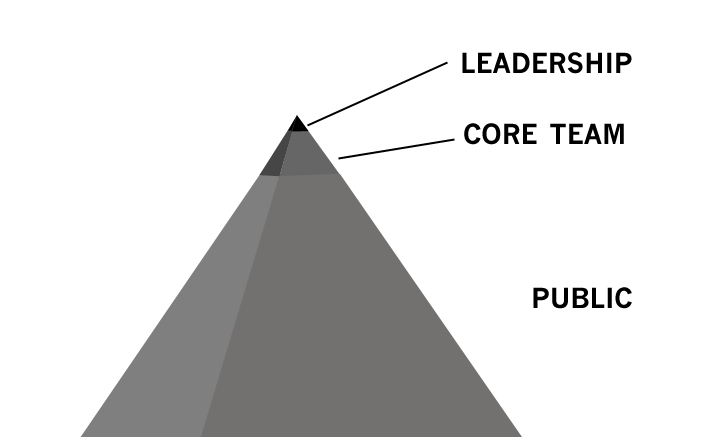
<style>
.page{position:relative;width:714px;height:437px;background:#ffffff}
.page>*{position:absolute;margin:0}
.t1{font:38.5px "NewsGothicMT-Bold";color:#000000;font-variant:small-caps}
</style>
<div class="page">
<p class="t1" style="left:462px;top:52px;width:170px;height:22px">leadership</p>
<p class="t1" style="left:464px;top:123px;width:160px;height:22px">core team</p>
<p class="t1" style="left:533px;top:287px;width:99px;height:22px">public</p>
</div>
